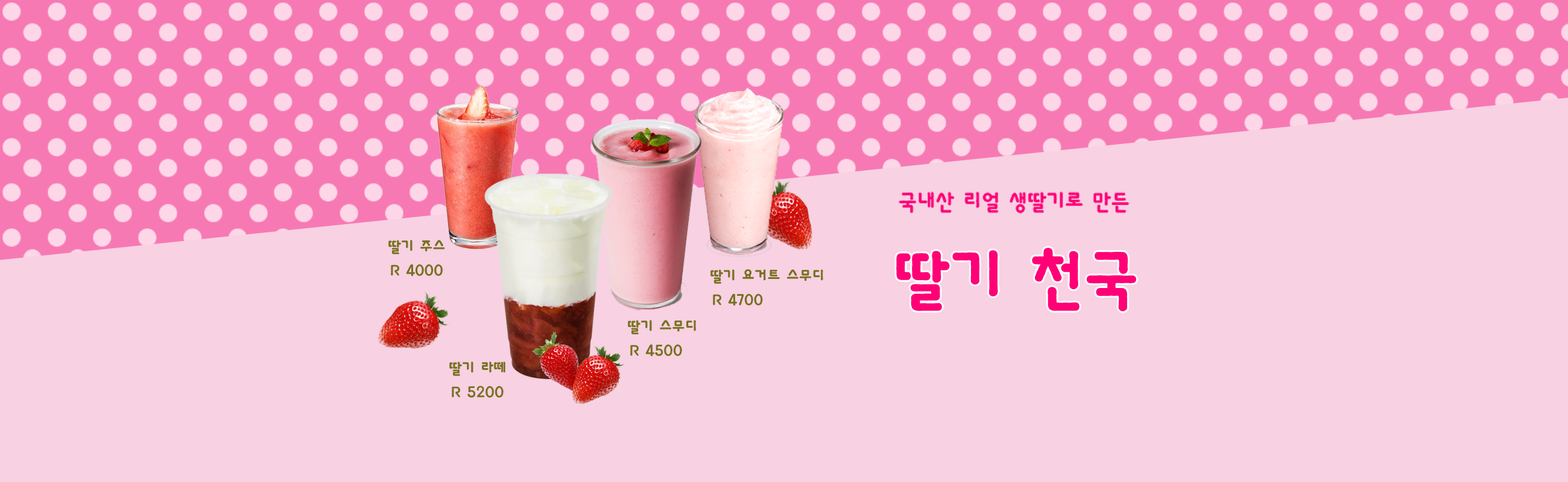
<style>
.page{position:relative;width:1568px;height:482px;background:#f8d1e3}
.page>*{position:absolute;margin:0}
.t1{font:21.9px "HaanBaekjeB";color:#ff0076}
.t2{font:15.1px "HaanBaekjeB";color:#76711f}
.t3{font:64.3px "HaanBaekjeB";color:#ff0076}
</style>
<div class="page">
<p class="t1" style="left:899px;top:192px;width:231px;height:22px">국내산 리얼 생딸기로 만든</p>
<p class="t2" style="left:388px;top:240px;width:57px;height:14px">딸기 주스</p>
<p class="t3" style="left:896px;top:248px;width:240px;height:64px">딸기 천국</p>
<p class="t2" style="left:391px;top:264px;width:52px;height:13px">R 4000</p>
<p class="t2" style="left:710px;top:270px;width:113px;height:14px">딸기 요거트 스무디</p>
<p class="t2" style="left:713px;top:294px;width:50px;height:12px">R 4700</p>
<p class="t2" style="left:628px;top:320px;width:68px;height:15px">딸기 스무디</p>
<p class="t2" style="left:630px;top:344px;width:52px;height:13px">R 4500</p>
<p class="t2" style="left:449px;top:362px;width:56px;height:14px">딸기 라떼</p>
<p class="t2" style="left:452px;top:386px;width:52px;height:12px">R 5200</p>
</div>
